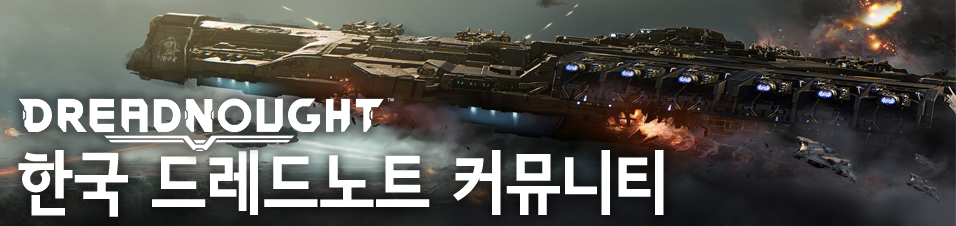
<style>
.page{position:relative;width:956px;height:226px}
.page>*{position:absolute;margin:0}
.t1{font:67.5px "SeN-CBL";letter-spacing:0.02em;color:#ffffff}
</style>
<div class="page">
<p class="t1" style="left:18px;top:150px;width:646px;height:67px">한국 드레드노트 커뮤니티</p>
</div>
